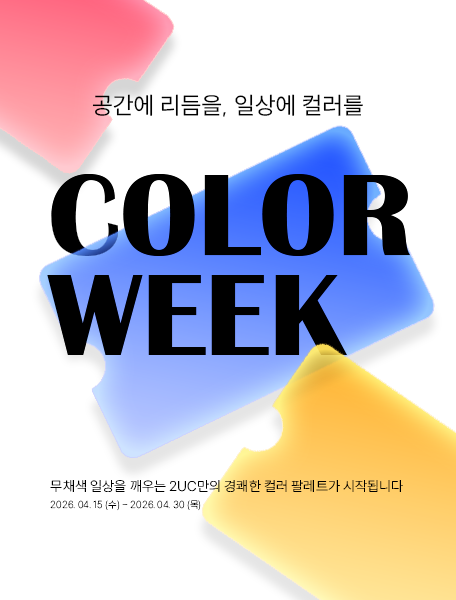
<style>
.page{position:relative;width:456px;height:600px;background:#ffffff}
.page>*{position:absolute;margin:0}
.t1{font:24px "SUIT-Regular";color:#000000}
.t2{font:120px/100px "BritannicBold";color:#000000}
.t3{font:14px "Pretendard-ExtraLight";color:#000000}
.t4{font:10px "Pretendard-Thin";color:#000000}
</style>
<div class="page">
<p class="t1" style="left:92px;top:94px;width:271px;height:23px">공간에 리듬을, 일상에 컬러를</p>
<p class="t2" style="left:47px;top:174px;width:364px;height:181px">COLOR <br>WEEK</p>
<p class="t2" style="left:47px;top:174px;width:364px;height:181px">COLOR <br>WEEK</p>
<p class="t3" style="left:50px;top:480px;width:353px;height:12px">무채색 일상을 깨우는 2UC만의 경쾌한 컬러 팔레트가 시작됩니다</p>
<p class="t4" style="left:50px;top:500px;width:151px;height:11px">2026. 04. 15 (수) ~ 2026. 04. 30 (목)</p>
</div>
